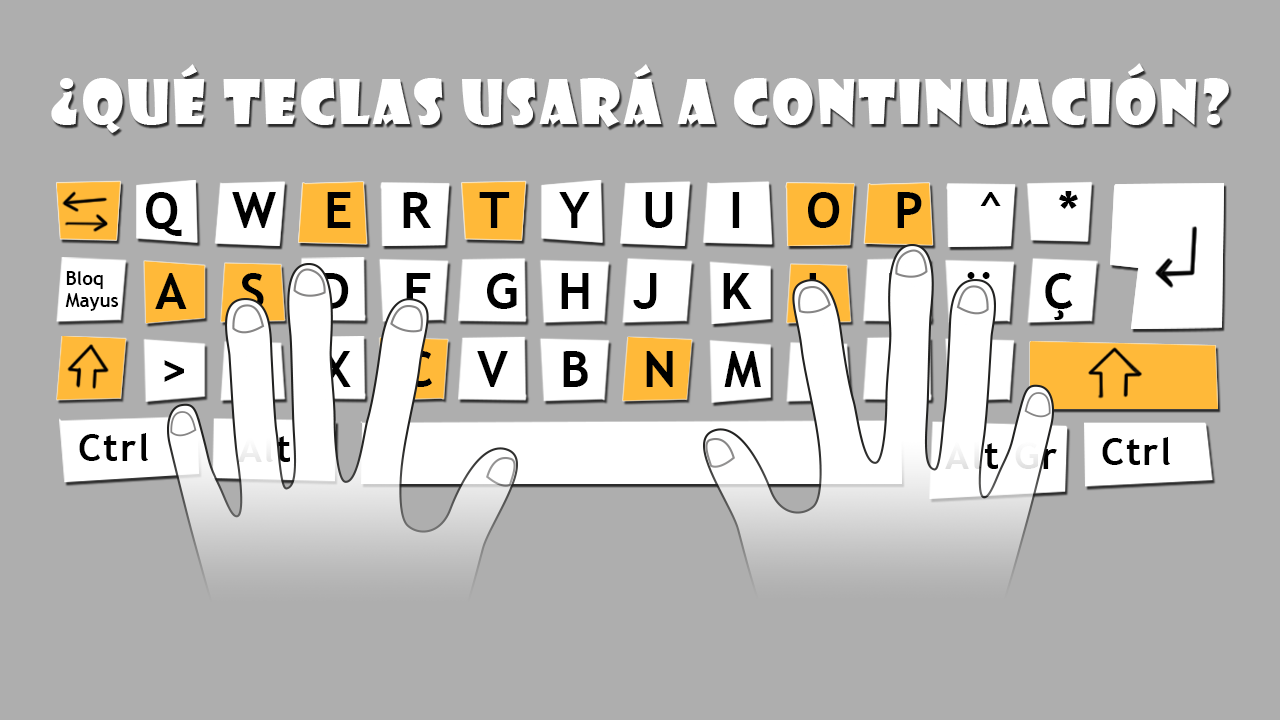
<style>
.page{position:relative;width:1280px;height:720px;background:#aeaeae}
.page>*{position:absolute;margin:0}
.t1{font:60px "ShowcardGothic-Reg";letter-spacing:0.05em;color:#ffffff}
.t2{font:50.2px "TrebuchetMS-Bold";letter-spacing:1.05em;color:#000000}
.t3{font:50.2px "TrebuchetMS-Bold";letter-spacing:1.1em;color:#000000}
.t4{font:50.2px "TrebuchetMS-Bold";letter-spacing:0.8em;color:#000000}
.t5{font:18.8px "TrebuchetMS-Bold";color:#000000}
.t6{font:37.7px "TrebuchetMS-Bold";letter-spacing:0.05em;color:#000000}
.t7{font:37.7px "TrebuchetMS-Bold";letter-spacing:0.05em;color:#ededed}
.t8{font:37.7px "TrebuchetMS-Bold";letter-spacing:0.05em}
</style>
<div class="page">
<p class="t1" style="left:51px;top:63px;width:1178px;height:70px">¿Qué teclas usará a continuación?</p>
<p class="t2" style="left:145px;top:191px;width:933px;height:45px">QWERTYUIOP^*</p>
<p class="t3" style="left:155px;top:263px;width:918px;height:57px"><span class="t2">ASDF</span><span class="t4">GHJ</span>KLÑ¨Ç</p>
<p class="t5" style="left:65px;top:271px;width:54px;height:40px">Bloq<br>Mayus</p>
<p class="t2" style="left:164px;top:351px;width:822px;height:45px">&gt;ZXCVBNM;:_</p>
<p class="t6" style="left:79px;top:433px;width:69px;height:28px">Ctrl</p>
<p class="t7" style="left:238px;top:434px;width:52px;height:28px">Alt</p>
<p class="t6" style="left:1102px;top:437px;width:68px;height:28px">Ctrl</p>
<p class="t8" style="left:945px;top:441px;width:112px;height:28px">Alt Gr</p>
</div>
